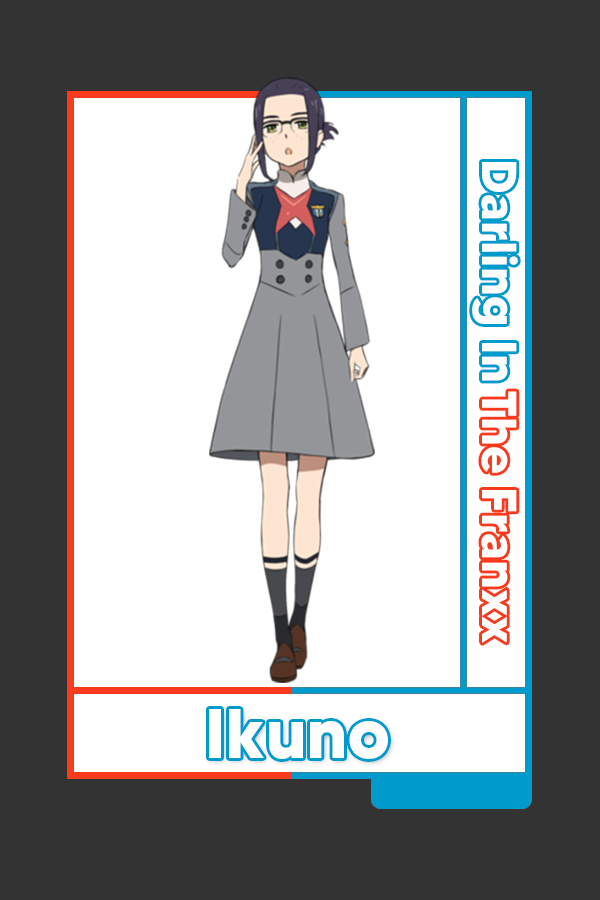
<style>
.page{position:relative;width:600px;height:900px;background:#ffffff}
.page>*{position:absolute;margin:0}
.t1{font:48.8px "MADETOMMY-Bold";color:#ffffff}
.t2{font:70.1px "MADETOMMY-Bold";color:#ffffff}
</style>
<div class="page">
<p class="t1" style="left:472px;top:162px;width:46px;height:219px;rotate:90deg">Darling In</p>
<p class="t1" style="left:481px;top:391px;width:36px;height:252px;rotate:90deg">The Franxx</p>
<p class="t2" style="left:209px;top:709px;width:179px;height:50px">Ikuno</p>
</div>
